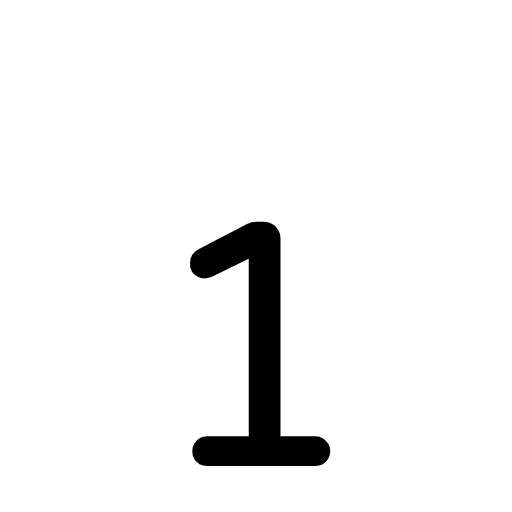
<style>
.page{position:relative;width:512px;height:512px;background:#ffffff}
.page>*{position:absolute;margin:0}
.t1{font:350px "VarelaRound-Regular";color:#000000}
</style>
<div class="page">
<p class="t1" style="left:189px;top:221px;width:142px;height:245px">1</p>
</div>
